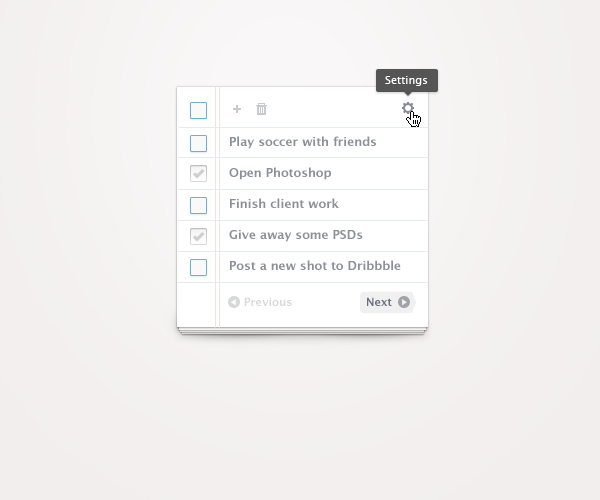
<style>
.page{position:relative;width:600px;height:500px}
.page>*{position:absolute;margin:0}
.t1{font:11px "LucidaGrande";color:#ffffff}
.t2{font:12px/31px "LucidaGrande-Bold";color:#8b8f97}
.t3{font:11px "LucidaGrande-Bold";color:#d7d8da}
.t4{font:11px "LucidaGrande-Bold";color:#676f7f}
</style>
<div class="page">
<p class="t1" style="left:385px;top:76px;width:43px;height:10px">Settings</p>
<p class="t2" style="left:229px;top:136px;width:172px;height:134px">Play soccer with friends<br>Open Photoshop<br>Finish client work<br>Give away some PSDs<br>Post a new shot to Dribbble</p>
<p class="t3" style="left:244px;top:297px;width:148px;height:9px">Previous<span class="t4">         Next</span></p>
</div>
